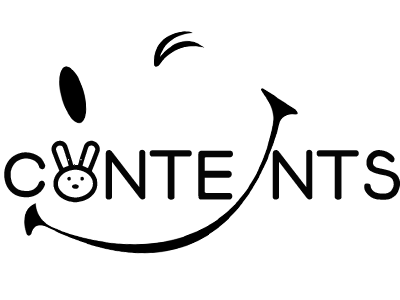
<style>
.page{position:relative;width:400px;height:300px;background:#ffffff}
.page>*{position:absolute;margin:0}
.t1{font:80px "CheekyRabbit";letter-spacing:0.005em;color:#050505}
</style>
<div class="page">
<p class="t1" style="left:4px;top:140px;width:229px;height:63px">CONTE</p>
<p class="t1" style="left:272px;top:149px;width:128px;height:51px">NTS</p>
</div>
